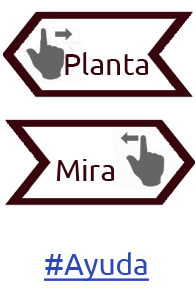
<style>
.page{position:relative;width:196px;height:306px;background:#ffffff}
.page>*{position:absolute;margin:0}
.t1{font:30px "Ubuntu";color:#39050c}
.t2{font:30px "Ubuntu";color:#2c48bd;text-decoration:underline}
</style>
<div class="page">
<p class="t1" style="left:65px;top:52px;width:83px;height:23px">Planta</p>
<p class="t1" style="left:57px;top:159px;width:57px;height:22px">Mira</p>
<p class="t2" style="left:44px;top:252px;width:105px;height:29px">#Ayuda</p>
</div>
